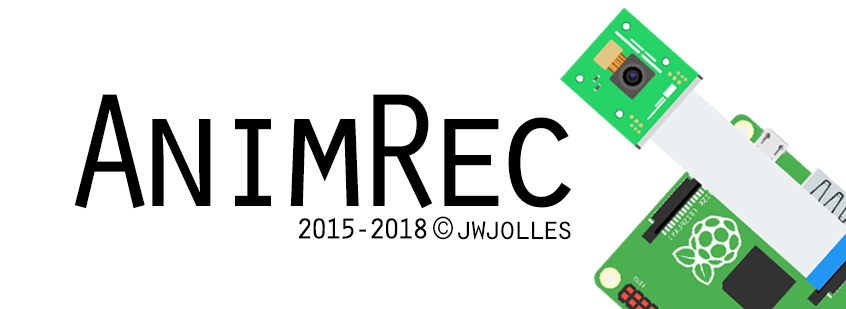
<style>
.page{position:relative;width:846px;height:309px;background:#ffffff}
.page>*{position:absolute;margin:0}
.t1{font:166.7px "OratorStd";letter-spacing:-0.17em;color:#000000}
.t2{font:29.2px "OratorStd";letter-spacing:-0.13em;color:#000000;font-weight:bold}
.t3{font:33.3px "OratorStd";letter-spacing:-0.17em;color:#000000}
</style>
<div class="page">
<p class="t1" style="left:74px;top:94px;width:497px;height:115px">AnimRec</p>
<p class="t2" style="left:299px;top:218px;width:128px;height:21px">2015-2018</p>
<p class="t3" style="left:433px;top:216px;width:138px;height:24px">© jwjolles</p>
</div>
